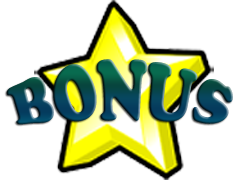
<style>
.page{position:relative;width:248px;height:180px;background:#ffffff}
.page>*{position:absolute;margin:0}
.t1{font:47.1px "CooperBlackStd"}
</style>
<div class="page">
<p class="t1" style="left:6px;top:59px;width:227px;height:66px">BONUS</p>
</div>
